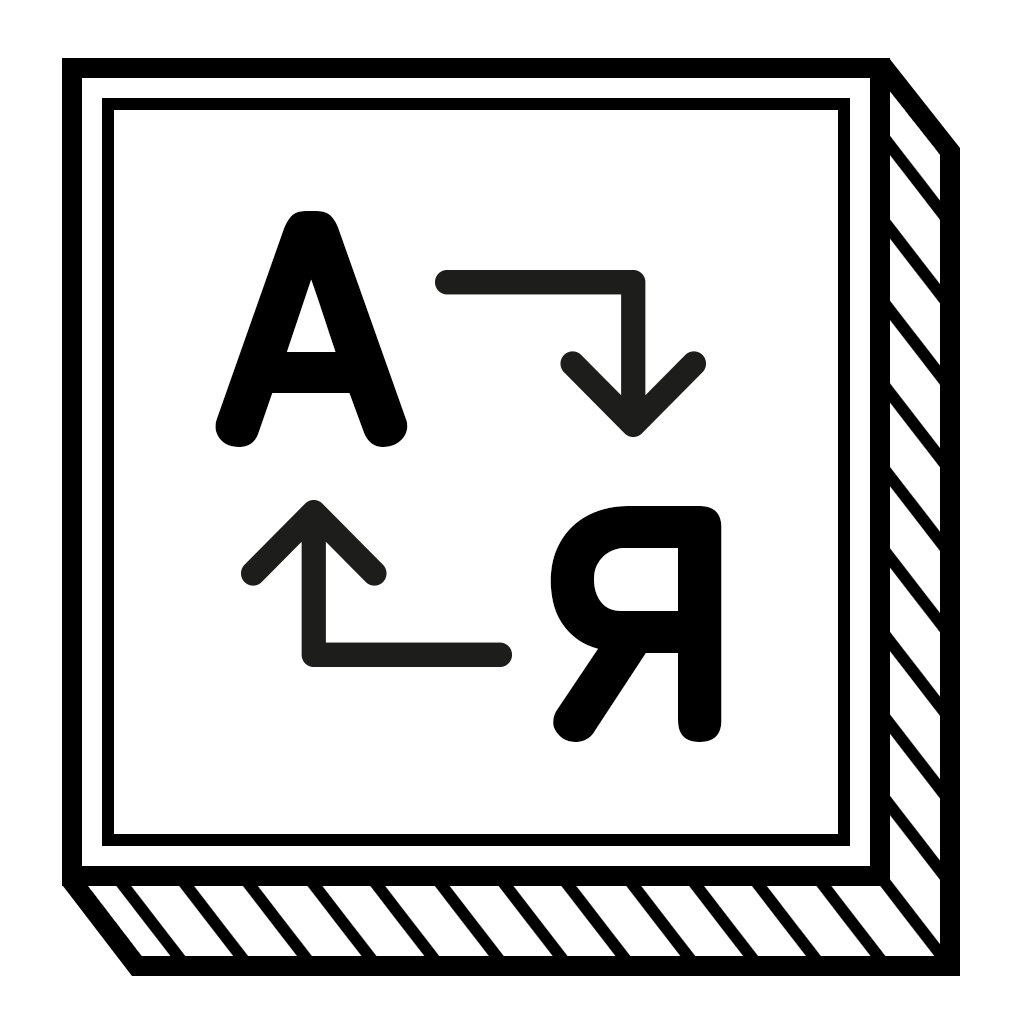
<style>
.page{position:relative;width:1024px;height:1024px;background:#ffffff}
.page>*{position:absolute;margin:0}
.t1{font:348px "PFIsotextPro-Bold";color:#000000;font-weight:bold}
</style>
<div class="page">
<p class="t1" style="left:215px;top:211px;width:193px;height:236px">A</p>
<p class="t1" style="left:550px;top:506px;width:172px;height:236px">Я</p>
</div>
